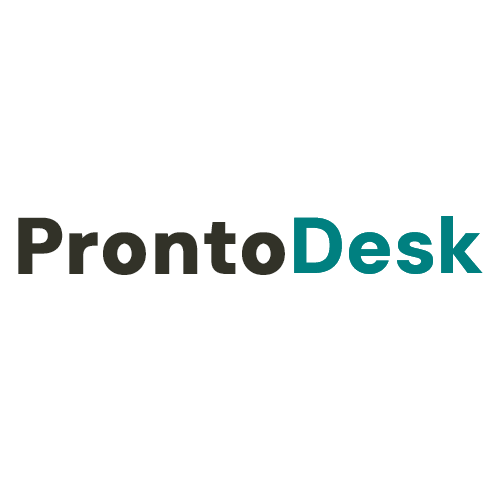
<style>
.page{position:relative;width:500px;height:500px;background:#ffffff}
.page>*{position:absolute;margin:0}
.t1{font:79px "DMSans-Black";font-weight:bold}
.t2{font:79px "DMSans-Black"}
.t3{font:79px "DMSans-Black";color:#323228;font-weight:bold}
.t4{font:79px "DMSans-Black";color:#008080}
</style>
<div class="page">
<p class="t1" style="left:18px;top:216px;width:465px;height:59px">Pronto<span class="t2">Desk</span></p>
<p class="t3" style="left:18px;top:216px;width:465px;height:59px">Pronto<span class="t4">Desk</span></p>
</div>
